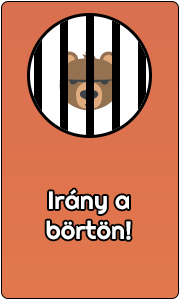
<style>
.page{position:relative;width:180px;height:300px}
.page>*{position:absolute;margin:0}
.t1{font:25px "Righteous-Regular";color:#ffffff}
</style>
<div class="page">
<p class="t1" style="left:46px;top:189px;width:85px;height:51px;text-align:center">Irány a<br>börtön!</p>
</div>
